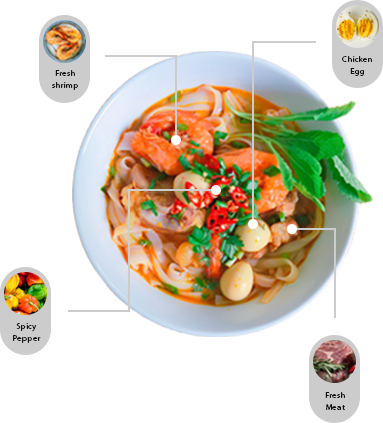
<style>
.page{position:relative;width:383px;height:423px;background:#ffffff}
.page>*{position:absolute;margin:0}
.t1{font:8.3px/12.5px "MyriadPro-Regular";letter-spacing:0.05em;color:#111111}
</style>
<div class="page">
<p class="t1" style="left:342px;top:56px;width:30px;height:20px;text-align:center">Chicken<br>Egg</p>
<p class="t1" style="left:52px;top:70px;width:26px;height:20px;text-align:center">Fresh<br>shrimp</p>
<p class="t1" style="left:13px;top:323px;width:28px;height:20px;text-align:center">Spicy<br>Pepper</p>
<p class="t1" style="left:325px;top:392px;width:20px;height:18px;text-align:center">Fresh<br>Meat</p>
</div>
